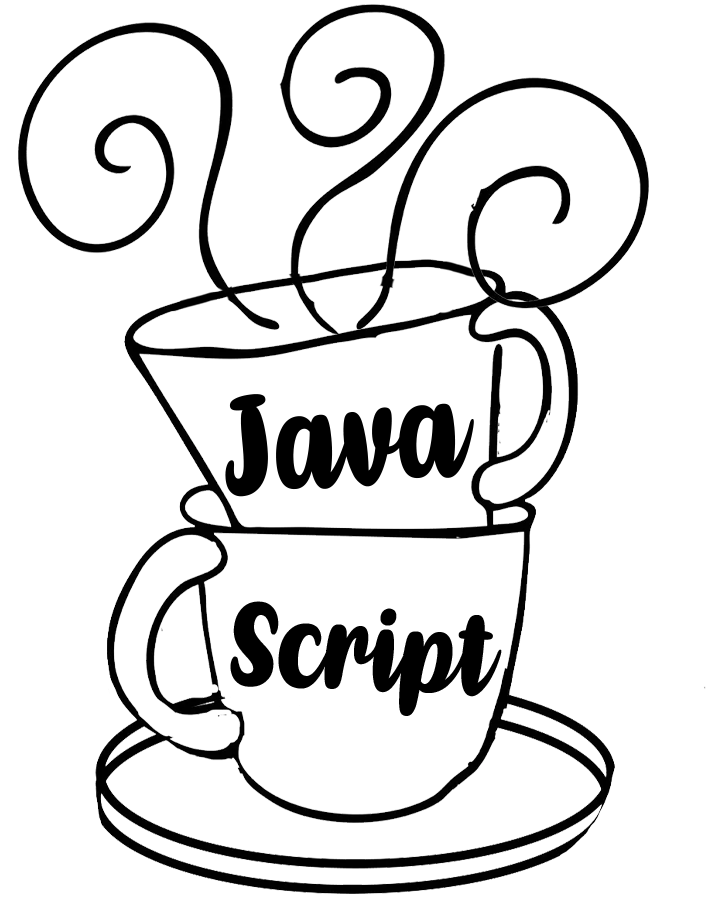
<style>
.page{position:relative;width:718px;height:898px;background:#ffffff}
.page>*{position:absolute;margin:0}
.t1{font:130px "Kathen";color:#000000;scale:0.83 1}
.t2{font:109.7px "Kathen";color:#000000;scale:0.83 1}
</style>
<div class="page">
<p class="t1" style="left:225px;top:394px;width:249px;height:103px;rotate:-5deg">Java</p>
<p class="t2" style="left:230px;top:601px;width:272px;height:115px;rotate:2deg">Script</p>
</div>
